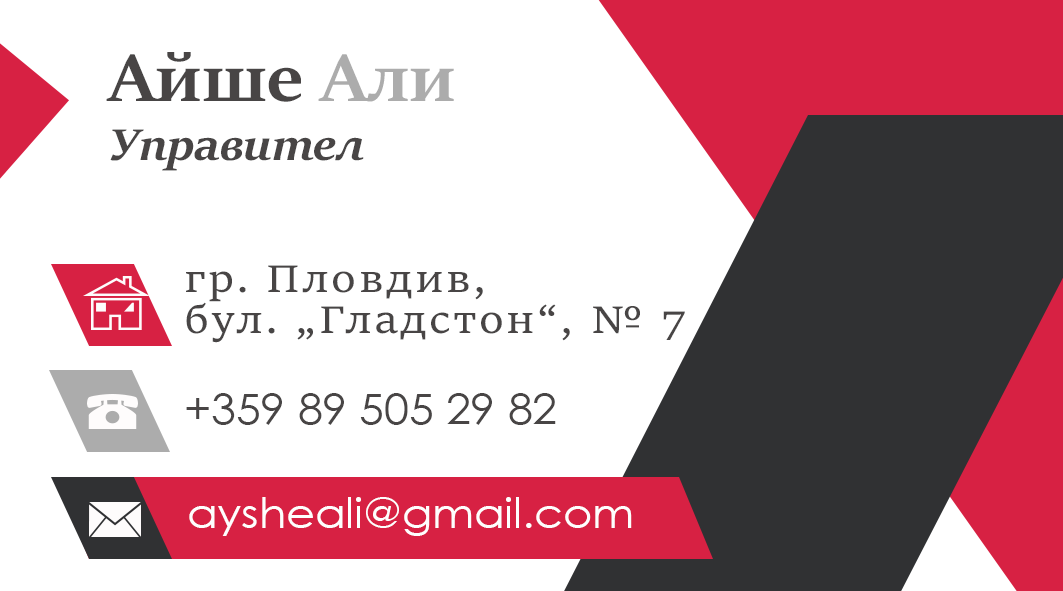
<style>
.page{position:relative;width:1063px;height:591px;background:#ffffff}
.page>*{position:absolute;margin:0}
.t1{font:75px "SitkaBanner-Bold";color:#484545;scale:1.07 1}
.t2{font:75px "SitkaBanner-Bold";color:#acacac;scale:1.07 1}
.t3{font:50px "SitkaBanner-BoldItalic";color:#484545;scale:1.07 1}
.t4{font:41.7px/41.7px "SitkaText";letter-spacing:0.05em;color:#484545;scale:1.07 1}
.t5{font:41.7px "CenturyGothic";color:#484545;scale:1.07 1}
.t6{font:41.7px "CenturyGothic";color:#fefefe;scale:1.07 1}
</style>
<div class="page">
<p class="t1" style="left:106px;top:52px;width:348px;height:50px">Айше <span class="t2">Али</span></p>
<p class="t3" style="left:110px;top:129px;width:254px;height:42px">Управител</p>
<p class="t4" style="left:186px;top:265px;width:499px;height:78px">гр. Пловдив, <br>бул. „Гладстон“, № 7</p>
<p class="t5" style="left:186px;top:393px;width:370px;height:32px">+359 89 505 29 82</p>
<p class="t6" style="left:189px;top:497px;width:443px;height:39px">aysheali@gmail.com</p>
</div>
